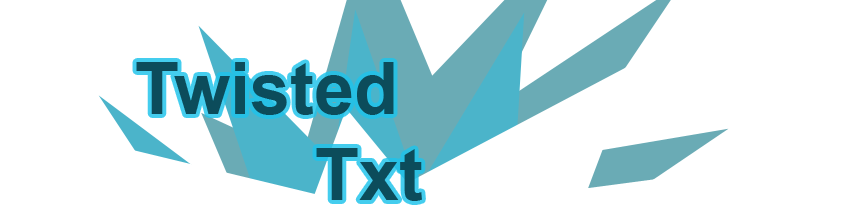
<style>
.page{position:relative;width:846px;height:220px;background:#ffffff}
.page>*{position:absolute;margin:0}
.t1{font:72px "Arial-BoldMT";color:#0c4c5b}
</style>
<div class="page">
<p class="t1" style="left:136px;top:62px;width:286px;height:139px">Twisted <br>         Txt</p>
<p class="t1" style="left:136px;top:62px;width:286px;height:139px">Twisted <br>         Txt</p>
</div>
